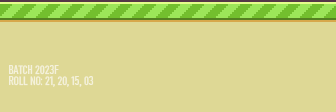
<style>
.page{position:relative;width:336px;height:112px;background:#ded895}
.page>*{position:absolute;margin:0}
.t1{font:12px "Bahnschrift-Condensed";color:#f4f1da}
</style>
<div class="page">
<p class="t1" style="left:9px;top:65px;width:50px;height:10px">BATCH 2023F</p>
<p class="t1" style="left:9px;top:76px;width:85px;height:11px">ROLL NO: 21, 20, 15, 03</p>
</div>
